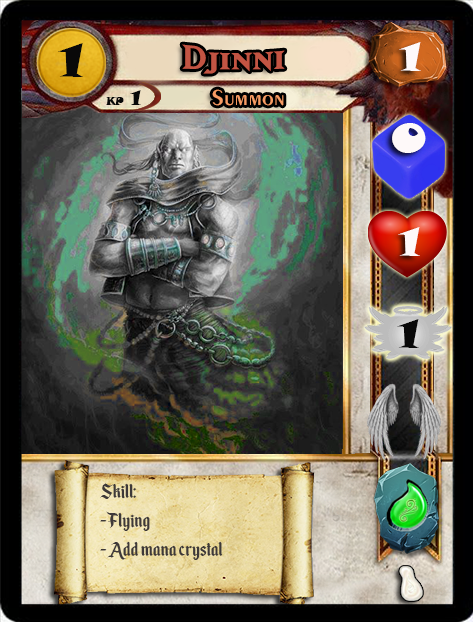
<style>
.page{position:relative;width:473px;height:622px}
.page>*{position:absolute;margin:0}
.t1{font:46.6px "SnapITC-Regular";color:#090909;scale:1.05 1}
.t2{font:40px "MatrixBoldSmallCaps";color:#c25443;scale:1.06 1}
.t3{font:40px "SnapITC-Regular";color:#fef9f9;scale:1.05 1}
.t4{font:22.7px "Exotic350BT-DemiBold";color:#f89c64;scale:1.06 1}
.t5{font:20.5px "SnapITC-Regular";color:#090909}
.t6{font:40px "SnapITC-Regular";color:#090909;scale:1.05 1}
.t7{font:24px "EnchantedLand";color:#3e3939}
</style>
<div class="page">
<p class="t1" style="left:58px;top:43px;width:25px;height:34px">1</p>
<p class="t2" style="left:182px;top:44px;width:103px;height:30px">Djinni</p>
<p class="t3" style="left:399px;top:42px;width:22px;height:29px">1</p>
<p class="t4" style="left:212px;top:89px;width:72px;height:17px">Summon</p>
<p class="t5" style="left:130px;top:90px;width:11px;height:15px">1</p>
<p class="t3" style="left:392px;top:123px;width:34px;height:30px">0</p>
<p class="t3" style="left:398px;top:227px;width:22px;height:29px">1</p>
<p class="t6" style="left:397px;top:319px;width:22px;height:29px">1</p>
<p class="t7" style="left:100px;top:483px;width:123px;height:77px">Skill:<br>- Flying<br>- Add mana crystal</p>
</div>
